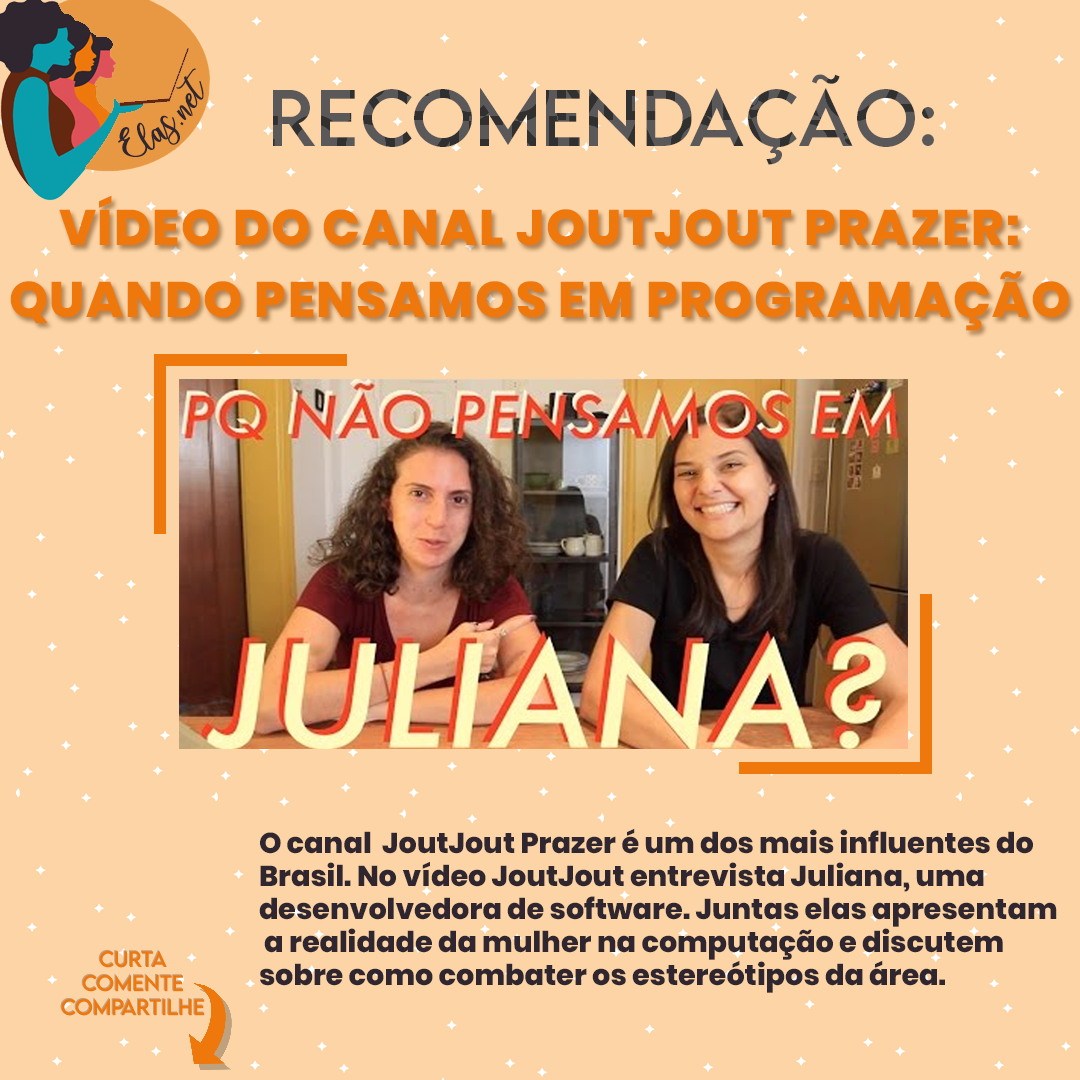
<style>
.page{position:relative;width:1080px;height:1080px;background:#fcd4a5}
.page>*{position:absolute;margin:0}
.t1{font:25px "charlinda-Regular";color:#2f262f;scale:1.18 1}
.t2{font:71.7px "LEMONMILK-Regular";letter-spacing:0.005em}
.t3{font:49.8px/72.3px "Poppins-ExtraBold";letter-spacing:0.03em;color:#ef780d;text-transform:uppercase}
.t4{font:28.7px/33.2px "Poppins-ExtraBold";color:#2f262f}
.t5{font:20px "LEMONMILK-Regular"}
.t6{font:20px "LEMONMILK-Regular";color:#ef780d}
</style>
<div class="page">
<p class="t1" style="left:118px;top:68px;width:86px;height:89px;rotate:-43deg">Elas.net</p>
<p class="t2" style="left:273px;top:74px;width:661px;height:91px">Recomendação:</p>
<p class="t3" style="left:10px;top:195px;width:1059px;height:136px;text-align:center">Vídeo do canal JoutJout Prazer:<br>Quando pensamos em programação</p>
<p class="t4" style="left:259px;top:828px;width:798px;height:165px">O canal  JoutJout Prazer é um dos mais influentes do <br>Brasil. No vídeo JoutJout entrevista Juliana, uma<br>desenvolvedora de software. Juntas elas apresentam<br> a realidade da mulher na computação e discutem <br>sobre como combater os estereótipos da área.</p>
<p class="t5" style="left:60px;top:949px;width:144px;height:66px;text-align:center">Curta<br>Comente<br>Compartilhe</p>
<p class="t6" style="left:61px;top:950px;width:144px;height:66px;text-align:center">Curta<br>Comente<br>Compartilhe</p>
</div>
